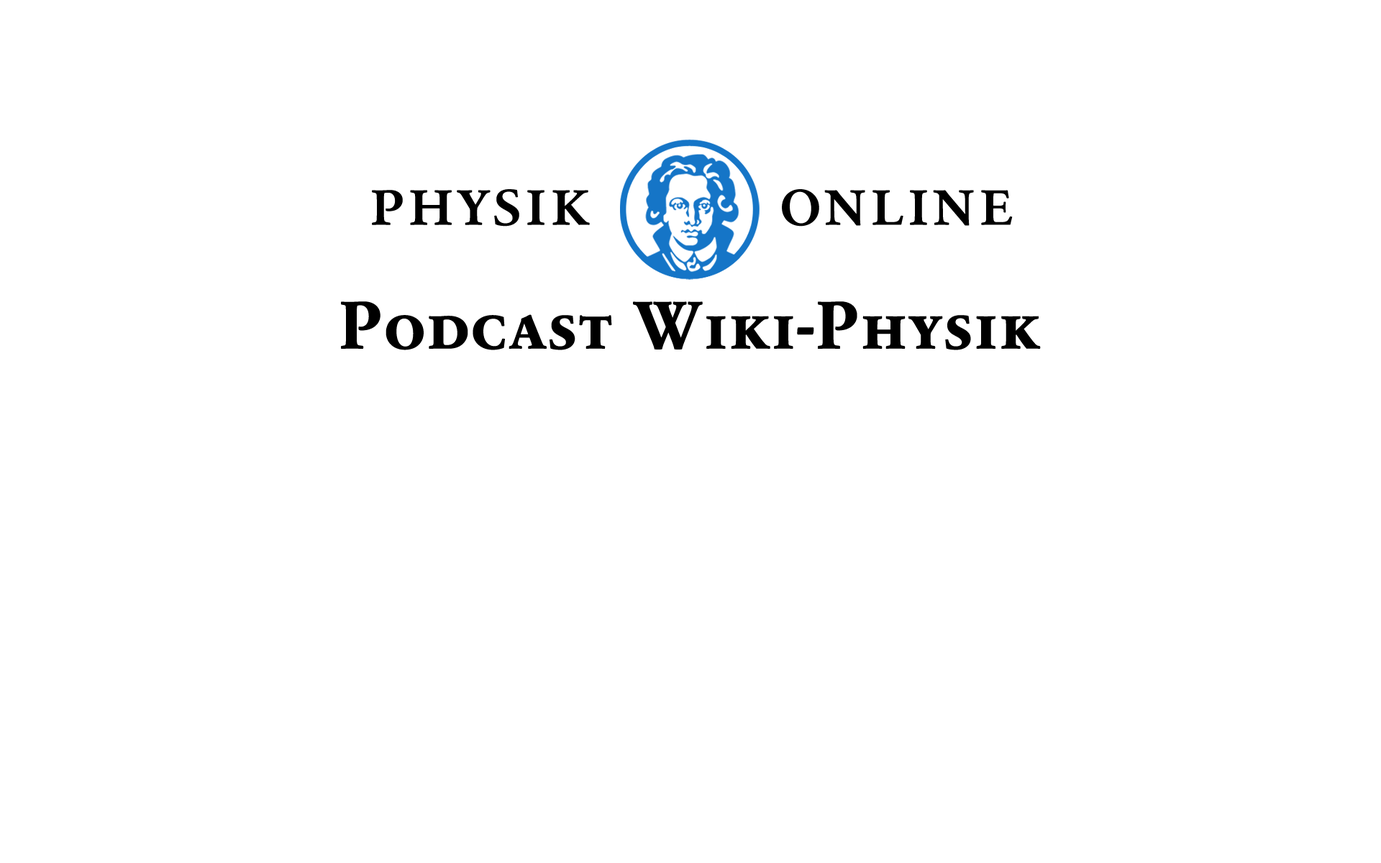
<style>
.page{position:relative;width:1381px;height:863px;background:#ffffff}
.page>*{position:absolute;margin:0}
.t1{font:74.9px "SabonNextRWSC";color:#000000;font-weight:bold}
.t2{font:67.9px "SabonNextRWSC-Bold";color:#000000;font-weight:bold}
</style>
<div class="page">
<p class="t1" style="left:372px;top:189px;width:218px;height:38px">physik</p>
<p class="t1" style="left:782px;top:189px;width:231px;height:38px">online</p>
<p class="t2" style="left:341px;top:301px;width:700px;height:49px">Podcast Wiki-Physik</p>
</div>
